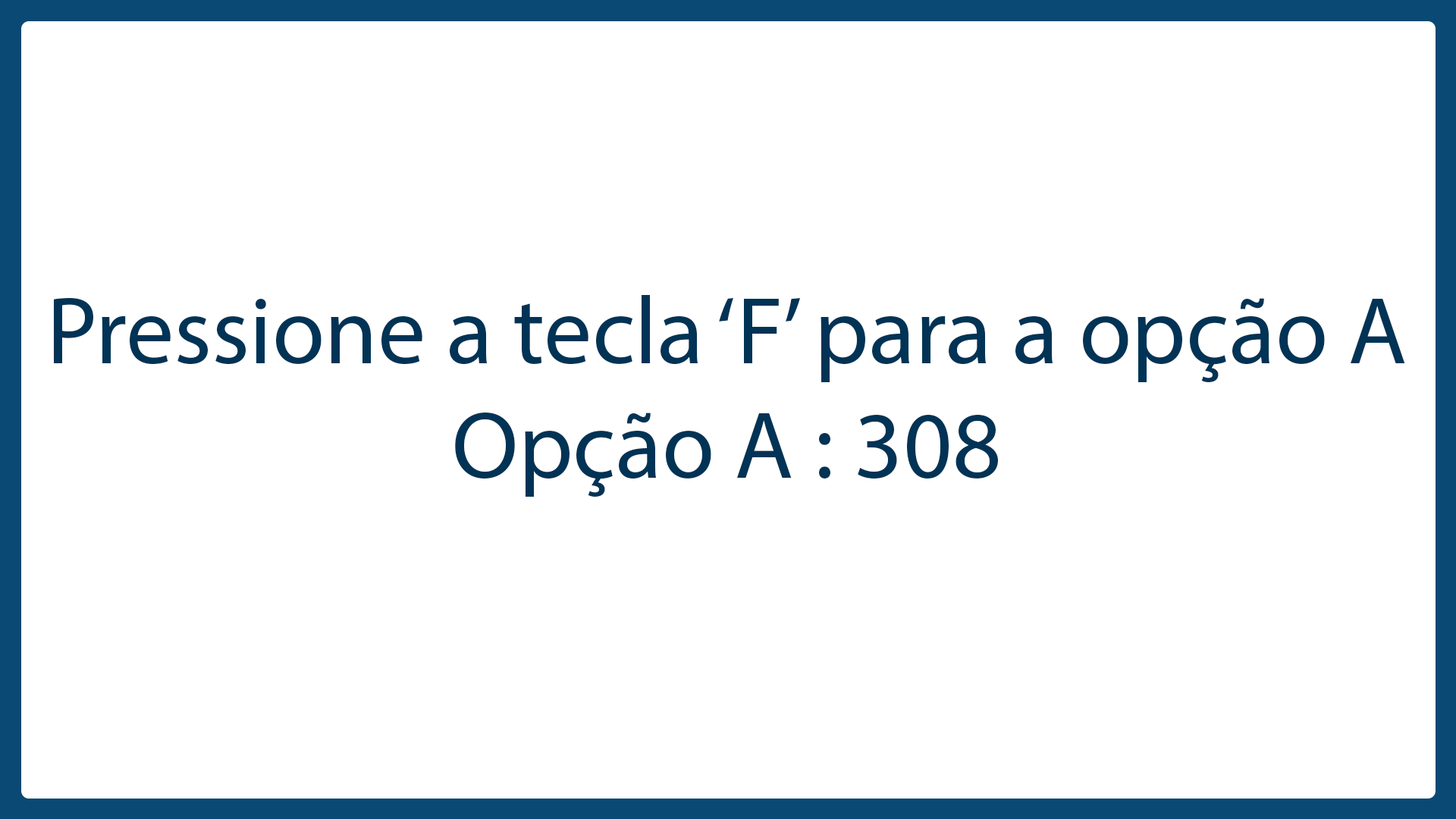
<style>
.page{position:relative;width:1456px;height:819px;background:#ffffff}
.page>*{position:absolute;margin:0}
.t1{font:95.9px "MyriadPro-Regular";color:#003355}
</style>
<div class="page">
<p class="t1" style="left:54px;top:295px;width:1351px;height:202px">Pressione a tecla ‘F’ para a opção A<br>                    Opção A : 308</p>
</div>
